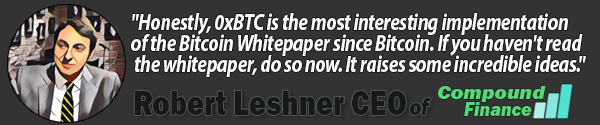
<style>
.page{position:relative;width:600px;height:125px;background:#333333}
.page>*{position:absolute;margin:0}
.t1{font:23.2px/21px "MyriadPro-BoldIt";letter-spacing:-0.02em;color:#ffffff;scale:0.82 1}
.t2{font:18.8px/17.9px "FranklinGothicURW-HeaIta";color:#55d977;scale:1.14 1}
.t3{font:19.7px/17.1px "FranklinGothicURW-HeaIta";color:#55d977;scale:0.93 1}
.t4{font:34.8px "FranklinGothicURW-Hea";color:#1c1c1c;scale:0.83 1}
.t5{font:24px "FranklinGothicURW-HeaIta";color:#1c1c1c;scale:0.83 1}
</style>
<div class="page">
<p class="t1" style="left:131px;top:13px;width:455px;height:64px">"Honestly, 0xBTC is the most interesting implementation <br>of the Bitcoin Whitepaper since Bitcoin. If you haven't read<br> the whitepaper, do so now. It raises some incredible ideas."</p>
<p class="t2" style="left:438px;top:85px;width:108px;height:31px">Compound<br><span class="t3">      Finance</span></p>
<p class="t4" style="left:135px;top:91px;width:271px;height:24px">Robert Leshner CEO</p>
<p class="t5" style="left:410px;top:98px;width:21px;height:17px">of</p>
</div>
